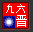
<style>
.page{position:relative;width:33px;height:32px;background:#f20000}
.page>*{position:absolute;margin:0}
.t1{font:10.4px "SimSun";color:#ffffff}
.t2{font:11.7px "SimSun";color:#ffffff}
</style>
<div class="page">
<p class="t1" style="left:6px;top:4px;width:19px;height:9px">九六</p>
<p class="t2" style="left:16px;top:15px;width:11px;height:12px">晋</p>
</div>
